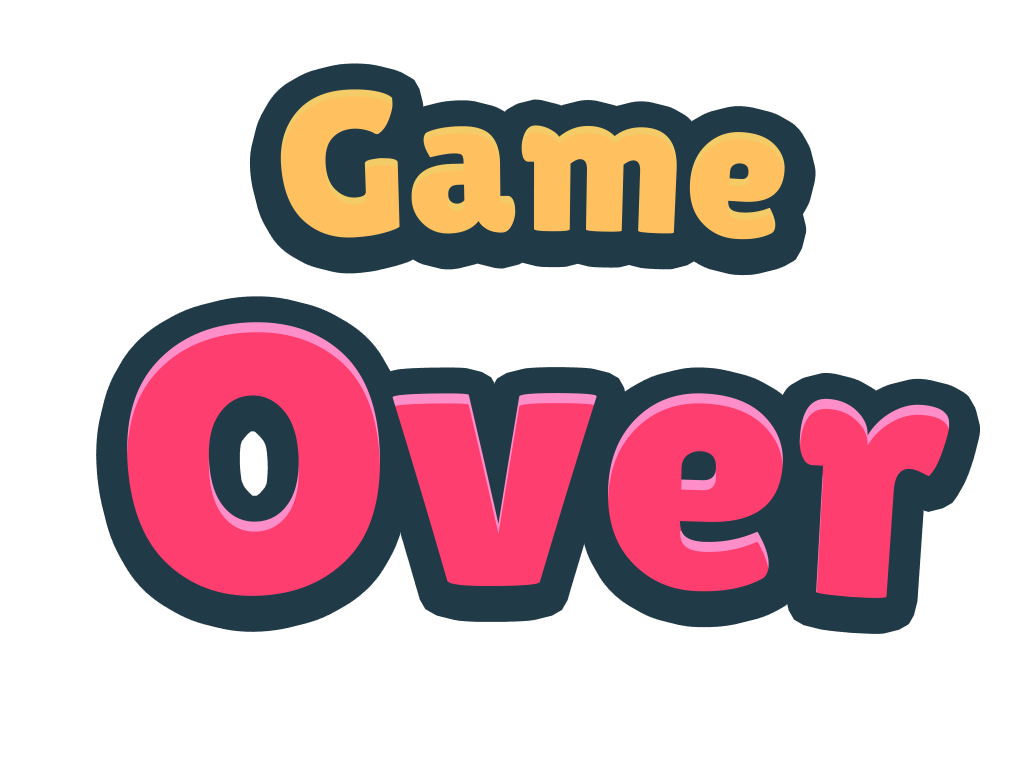
<style>
.page{position:relative;width:1028px;height:758px;background:#ffffff}
.page>*{position:absolute;margin:0}
.t1{font:205.6px "LilitaOne";color:#ffc160}
.t2{font:380.3px "LilitaOne";color:#ff3e70}
</style>
<div class="page">
<p class="t1" style="left:280px;top:89px;width:505px;height:151px">Game</p>
<p class="t2" style="left:127px;top:322px;width:823px;height:276px">Over</p>
</div>
